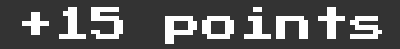
<style>
.page{position:relative;width:400px;height:49px;background:#333333}
.page>*{position:absolute;margin:0}
.t1{font:37px "PressStart2P-Regular";color:#ffffff}
</style>
<div class="page">
<p class="t1" style="left:22px;top:7px;width:360px;height:37px">+15 points</p>
</div>
